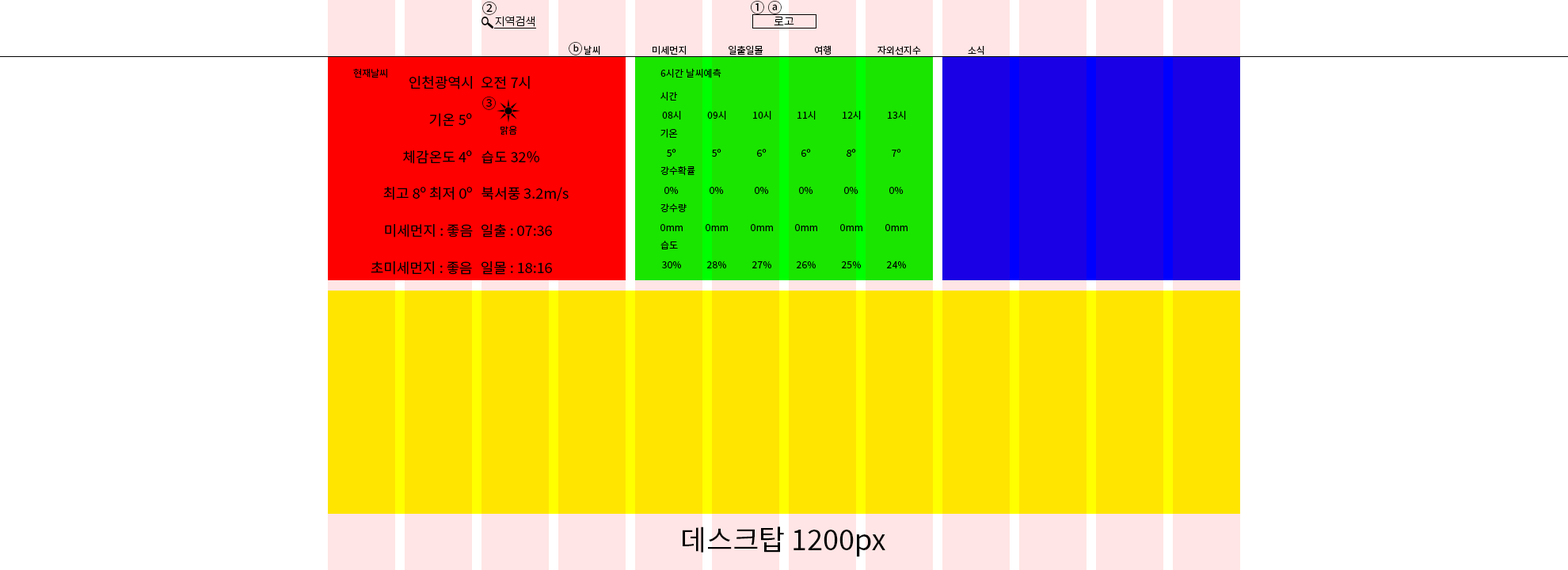
<style>
.page{position:relative;width:1568px;height:570px;background:#ffffff}
.page>*{position:absolute;margin:0}
.t1{font:14.3px "NotoSansKR-Regular";color:#000000}
.t2{font:11.1px "NotoSansKR-Light";color:#000000}
.t3{font:9.5px "NotoSansKR-Regular";color:#000000}
.t4{font:28.5px "NotoSansKR-Regular";color:#000000}
</style>
<div class="page">
<p class="t1" style="left:482px;top:2px;width:15px;height:13px">②</p>
<p class="t1" style="left:751px;top:1px;width:31px;height:13px">① ⓐ</p>
<p class="t2" style="left:495px;top:16px;width:40px;height:11px">지역검색</p>
<p class="t2" style="left:774px;top:17px;width:20px;height:8px">로고</p>
<p class="t1" style="left:569px;top:42px;width:13px;height:13px">ⓑ</p>
<p class="t3" style="left:584px;top:45px;width:16px;height:10px">날씨</p>
<p class="t3" style="left:653px;top:45px;width:33px;height:10px">미세먼지</p>
<p class="t3" style="left:729px;top:45px;width:34px;height:10px">일출일몰</p>
<p class="t3" style="left:815px;top:45px;width:17px;height:10px">여행</p>
<p class="t3" style="left:877px;top:45px;width:44px;height:10px">자외선지수</p>
<p class="t3" style="left:968px;top:46px;width:16px;height:9px">소식</p>
<p class="t3" style="left:353px;top:68px;width:34px;height:10px">현재날씨</p>
<p class="t1" style="left:409px;top:75px;width:63px;height:14px">인천광역시</p>
<p class="t1" style="left:481px;top:76px;width:49px;height:13px">오전 7시</p>
<p class="t3" style="left:660px;top:68px;width:61px;height:10px">6시간 날씨예측</p>
<p class="t1" style="left:482px;top:97px;width:14px;height:13px">③</p>
<p class="t3" style="left:660px;top:92px;width:17px;height:9px">시간</p>
<p class="t1" style="left:429px;top:113px;width:43px;height:14px">기온 5º</p>
<p class="t3" style="left:662px;top:111px;width:19px;height:9px">08시</p>
<p class="t3" style="left:707px;top:111px;width:19px;height:9px">09시</p>
<p class="t3" style="left:753px;top:111px;width:18px;height:9px">10시</p>
<p class="t3" style="left:797px;top:111px;width:19px;height:9px">11시</p>
<p class="t3" style="left:843px;top:111px;width:18px;height:9px">12시</p>
<p class="t3" style="left:888px;top:111px;width:18px;height:9px">13시</p>
<p class="t3" style="left:500px;top:126px;width:17px;height:9px">맑음</p>
<p class="t3" style="left:660px;top:128px;width:18px;height:10px">기온</p>
<p class="t3" style="left:667px;top:149px;width:9px;height:8px">5º</p>
<p class="t3" style="left:712px;top:149px;width:9px;height:8px">5º</p>
<p class="t3" style="left:757px;top:149px;width:10px;height:8px">6º</p>
<p class="t3" style="left:801px;top:149px;width:10px;height:8px">6º</p>
<p class="t3" style="left:847px;top:149px;width:9px;height:8px">8º</p>
<p class="t3" style="left:892px;top:149px;width:9px;height:8px">7º</p>
<p class="t1" style="left:403px;top:150px;width:69px;height:14px">체감온도 4º</p>
<p class="t1" style="left:481px;top:150px;width:58px;height:14px">습도 32%</p>
<p class="t3" style="left:660px;top:166px;width:35px;height:10px">강수확률</p>
<p class="t1" style="left:383px;top:186px;width:89px;height:14px">최고 8º 최저 0º</p>
<p class="t1" style="left:481px;top:187px;width:88px;height:14px">북서풍 3.2m/s</p>
<p class="t3" style="left:664px;top:187px;width:15px;height:7px">0%</p>
<p class="t3" style="left:710px;top:187px;width:14px;height:7px">0%</p>
<p class="t3" style="left:755px;top:187px;width:14px;height:7px">0%</p>
<p class="t3" style="left:799px;top:187px;width:14px;height:7px">0%</p>
<p class="t3" style="left:844px;top:187px;width:14px;height:7px">0%</p>
<p class="t3" style="left:889px;top:187px;width:15px;height:7px">0%</p>
<p class="t3" style="left:660px;top:204px;width:27px;height:8px">강수량</p>
<p class="t1" style="left:385px;top:224px;width:88px;height:14px">미세먼지 : 좋음</p>
<p class="t1" style="left:481px;top:224px;width:71px;height:14px">일출 : 07:36</p>
<p class="t3" style="left:660px;top:224px;width:23px;height:7px">0mm</p>
<p class="t3" style="left:706px;top:224px;width:22px;height:7px">0mm</p>
<p class="t3" style="left:751px;top:224px;width:22px;height:7px">0mm</p>
<p class="t3" style="left:795px;top:224px;width:22px;height:7px">0mm</p>
<p class="t3" style="left:840px;top:224px;width:22px;height:7px">0mm</p>
<p class="t3" style="left:885px;top:224px;width:23px;height:7px">0mm</p>
<p class="t3" style="left:660px;top:241px;width:18px;height:8px">습도</p>
<p class="t1" style="left:371px;top:261px;width:101px;height:14px">초미세먼지 : 좋음</p>
<p class="t1" style="left:481px;top:261px;width:71px;height:14px">일몰 : 18:16</p>
<p class="t3" style="left:662px;top:261px;width:19px;height:7px">30%</p>
<p class="t3" style="left:707px;top:261px;width:19px;height:7px">28%</p>
<p class="t3" style="left:752px;top:261px;width:19px;height:7px">27%</p>
<p class="t3" style="left:797px;top:261px;width:19px;height:7px">26%</p>
<p class="t3" style="left:842px;top:261px;width:19px;height:7px">25%</p>
<p class="t3" style="left:887px;top:261px;width:19px;height:7px">24%</p>
<p class="t4" style="left:683px;top:527px;width:202px;height:30px">데스크탑 1200px</p>
</div>
